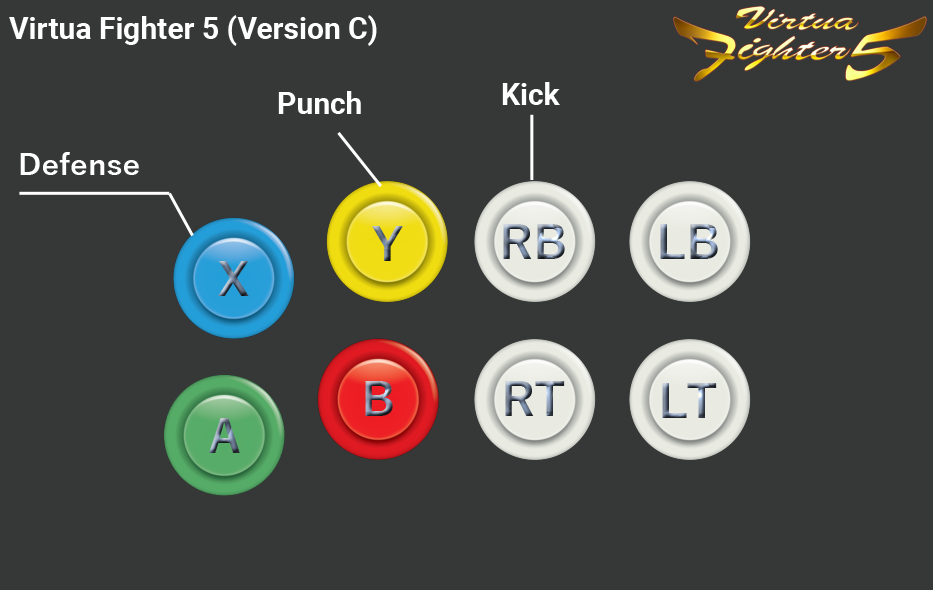
<style>
.page{position:relative;width:933px;height:590px;background:#363838}
.page>*{position:absolute;margin:0}
.t1{font:30px "Roboto-Bold";color:#ffffff}
.t2{font:30px "YuGothic-Bold";color:#ffffff}
</style>
<div class="page">
<p class="t1" style="left:9px;top:15px;width:368px;height:31px">Virtua Fighter 5 (Version C)</p>
<p class="t1" style="left:502px;top:82px;width:58px;height:23px">Kick</p>
<p class="t1" style="left:278px;top:91px;width:83px;height:23px">Punch</p>
<p class="t2" style="left:20px;top:152px;width:119px;height:23px">Defense</p>
</div>
